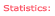
<style>
.page{position:relative;width:55px;height:16px;background:#ffffff}
.page>*{position:absolute;margin:0}
.t1{font:8px "Verdana";color:#fc5869;scale:1.2 1}
</style>
<div class="page">
<p class="t1" style="left:3px;top:4px;width:52px;height:9px">Statistics:</p>
</div>
